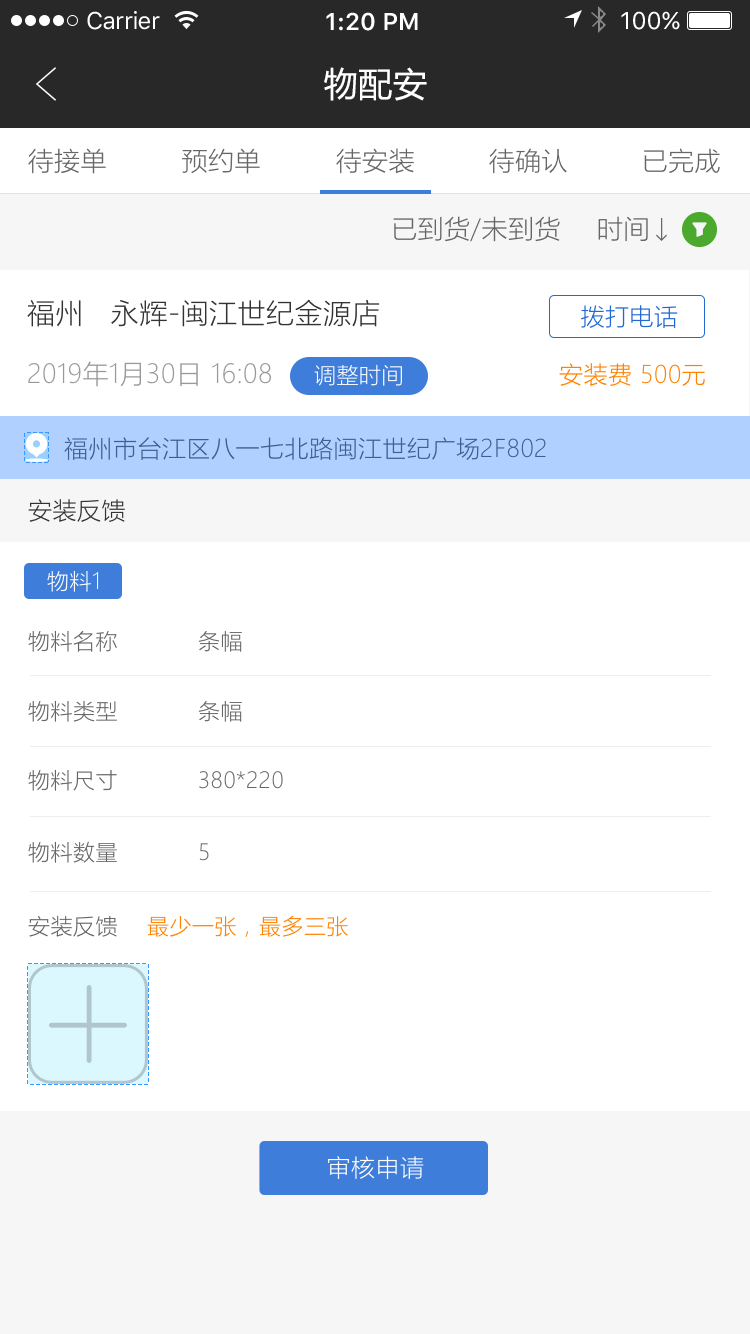
<style>
.page{position:relative;width:750px;height:1334px;background:#ffffff}
.page>*{position:absolute;margin:0}
.t1{font:24px "SFUIText-Regular";letter-spacing:-0.025em;color:#ffffff}
.t2{font:24px "SFUIText-Semibold";color:#ffffff}
.t3{font:24px "SFUIText-Regular";color:#ffffff}
.t4{font:34px "MicrosoftYaHei";letter-spacing:0.02em;color:#ffffff}
.t5{font:26px "MicrosoftYaHeiLight";letter-spacing:0.02em;color:#666666}
.t6{font:28px "MicrosoftYaHeiLight";letter-spacing:0.02em;color:#333333}
.t7{font:24px "MicrosoftYaHeiLight";letter-spacing:0.02em;color:#2269d4}
.t8{font:26px "MicrosoftYaHeiLight";letter-spacing:0.02em;color:#999999}
.t9{font:22px "MicrosoftYaHeiLight";letter-spacing:0.02em;color:#ffffff}
.t10{font:24px "MicrosoftYaHeiLight";letter-spacing:0.02em;color:#ff8100}
.t11{font:24px "MicrosoftYaHeiLight";letter-spacing:0.02em;color:#3d6094}
.t12{font:24px "MicrosoftYaHeiLight";letter-spacing:0.02em;color:#333333}
.t13{font:22px "MicrosoftYaHeiLight";letter-spacing:0.02em;color:#666666}
.t14{font:22px "MicrosoftYaHeiLight";letter-spacing:0.02em;color:#ff8100}
.t15{font:24px "MicrosoftYaHeiLight";letter-spacing:0.02em;color:#ffffff}
</style>
<div class="page">
<p class="t1" style="left:87px;top:11px;width:73px;height:19px">Carrier</p>
<p class="t2" style="left:326px;top:12px;width:92px;height:19px">1:20 PM</p>
<p class="t3" style="left:621px;top:11px;width:59px;height:19px">100%</p>
<p class="t4" style="left:324px;top:67px;width:103px;height:34px">物配安</p>
<p class="t5" style="left:28px;top:148px;width:78px;height:26px">待接单</p>
<p class="t5" style="left:182px;top:148px;width:78px;height:26px">预约单</p>
<p class="t5" style="left:336px;top:148px;width:78px;height:26px">待安装</p>
<p class="t5" style="left:489px;top:148px;width:78px;height:26px">待确认</p>
<p class="t5" style="left:644px;top:148px;width:76px;height:25px">已完成</p>
<p class="t5" style="left:393px;top:216px;width:167px;height:26px">已到货/未到货</p>
<p class="t5" style="left:598px;top:216px;width:50px;height:26px">时间</p>
<p class="t6" style="left:27px;top:299px;width:353px;height:28px">福州   永辉-闽江世纪金源店</p>
<p class="t7" style="left:581px;top:305px;width:97px;height:23px">拨打电话</p>
<p class="t8" style="left:28px;top:361px;width:243px;height:26px">2019年1月30日 16:08</p>
<p class="t9" style="left:314px;top:364px;width:88px;height:22px">调整时间</p>
<p class="t10" style="left:559px;top:363px;width:146px;height:23px">安装费 500元</p>
<p class="t11" style="left:64px;top:437px;width:482px;height:23px">福州市台江区八一七北路闽江世纪广场2F802</p>
<p class="t12" style="left:28px;top:499px;width:97px;height:23px">安装反馈</p>
<p class="t9" style="left:47px;top:570px;width:52px;height:22px">物料1</p>
<p class="t13" style="left:28px;top:630px;width:89px;height:22px">物料名称</p>
<p class="t13" style="left:198px;top:631px;width:44px;height:21px">条幅</p>
<p class="t13" style="left:28px;top:700px;width:89px;height:22px">物料类型</p>
<p class="t13" style="left:198px;top:701px;width:44px;height:21px">条幅</p>
<p class="t13" style="left:28px;top:769px;width:89px;height:22px">物料尺寸</p>
<p class="t13" style="left:199px;top:771px;width:84px;height:18px">380*220</p>
<p class="t13" style="left:28px;top:841px;width:89px;height:22px">物料数量</p>
<p class="t13" style="left:199px;top:843px;width:10px;height:18px">5</p>
<p class="t13" style="left:28px;top:915px;width:89px;height:22px">安装反馈</p>
<p class="t14" style="left:147px;top:915px;width:201px;height:22px">最少一张，最多三张</p>
<p class="t15" style="left:328px;top:1156px;width:96px;height:23px">审核申请</p>
</div>
